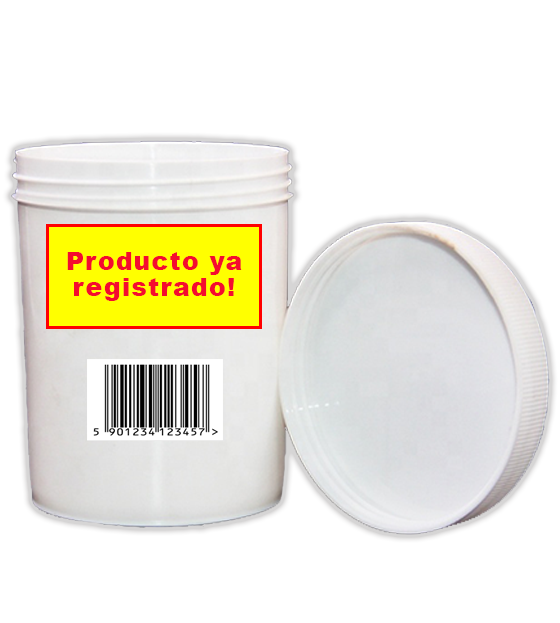
<style>
.page{position:relative;width:560px;height:623px;background:#ffffff}
.page>*{position:absolute;margin:0}
.t1{font:25px/8.8px "Arial-Black";letter-spacing:0.05em;color:#f40c2f}
</style>
<div class="page">
<p class="t1" style="left:67px;top:252px;width:175px;height:49px;text-align:center">Producto ya<br><br><br>registrado!</p>
</div>
